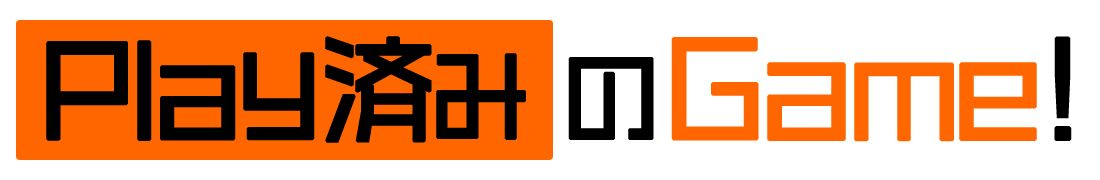
<style>
.page{position:relative;width:1100px;height:180px;background:#ffffff}
.page>*{position:absolute;margin:0}
.t1{font:115px "VDL-LineG-Regular";color:#000000;font-weight:bold}
.t2{font:100px "VDL-LineG-Regular";color:#000000;font-weight:bold}
.t3{font:120px "VDL-LineG-Regular";color:#0099ff;font-weight:bold}
.t4{font:120px "VDL-LineG-Regular";color:#000000;font-weight:bold}
</style>
<div class="page">
<p class="t1" style="left:46px;top:36px;width:1026px;height:107px">Play済<span class="t2">みの</span><span class="t3">Game</span><span class="t4">!</span></p>
</div>
